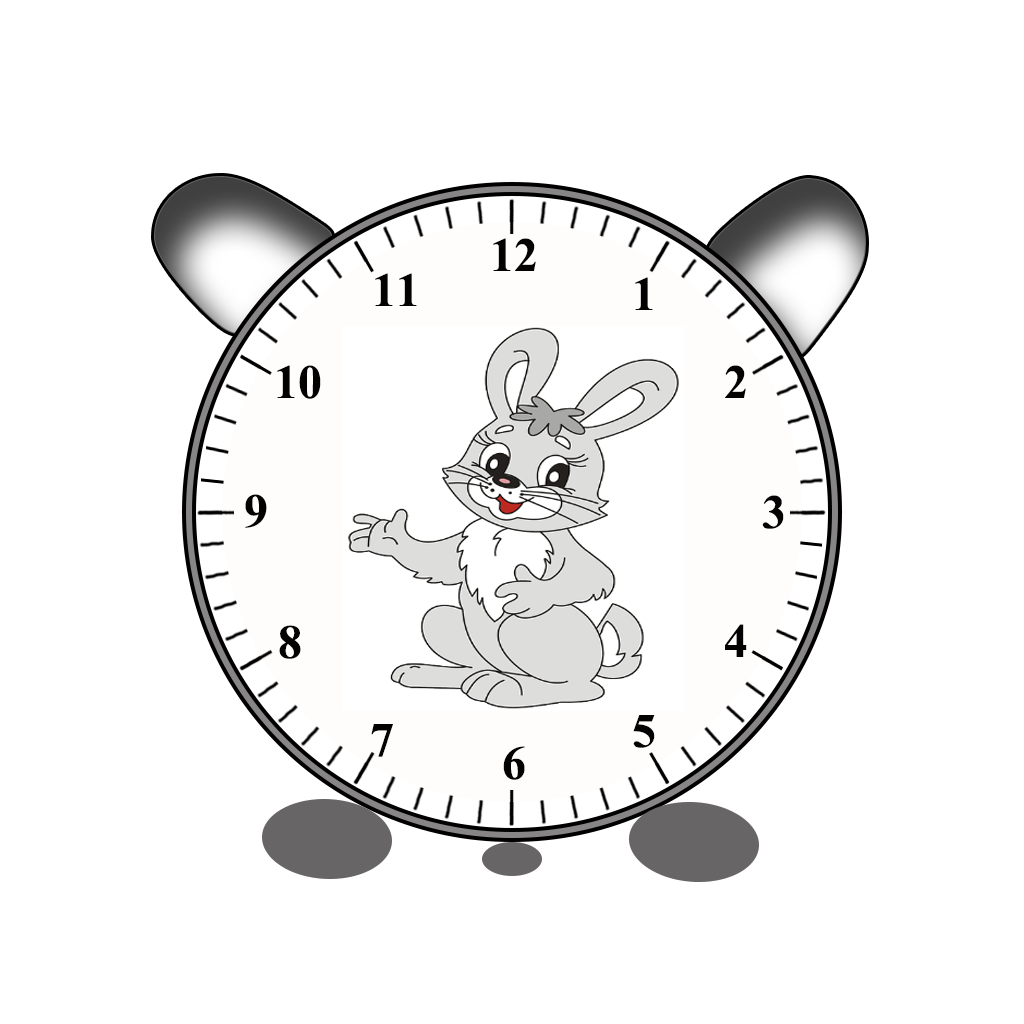
<style>
.page{position:relative;width:1024px;height:1024px;background:#ffffff}
.page>*{position:absolute;margin:0}
.t1{font:48px "TimesNewRomanPS-BoldMT";color:#020202}
</style>
<div class="page">
<p class="t1" style="left:493px;top:238px;width:43px;height:33px">12</p>
<p class="t1" style="left:375px;top:273px;width:42px;height:33px">11</p>
<p class="t1" style="left:635px;top:277px;width:18px;height:33px">1</p>
<p class="t1" style="left:277px;top:365px;width:44px;height:34px">10</p>
<p class="t1" style="left:725px;top:365px;width:21px;height:33px">2</p>
<p class="t1" style="left:245px;top:494px;width:22px;height:34px">9</p>
<p class="t1" style="left:762px;top:495px;width:22px;height:34px">3</p>
<p class="t1" style="left:279px;top:625px;width:22px;height:34px">8</p>
<p class="t1" style="left:725px;top:624px;width:22px;height:33px">4</p>
<p class="t1" style="left:371px;top:724px;width:22px;height:33px">7</p>
<p class="t1" style="left:633px;top:715px;width:22px;height:33px">5</p>
<p class="t1" style="left:503px;top:746px;width:22px;height:34px">6</p>
</div>
